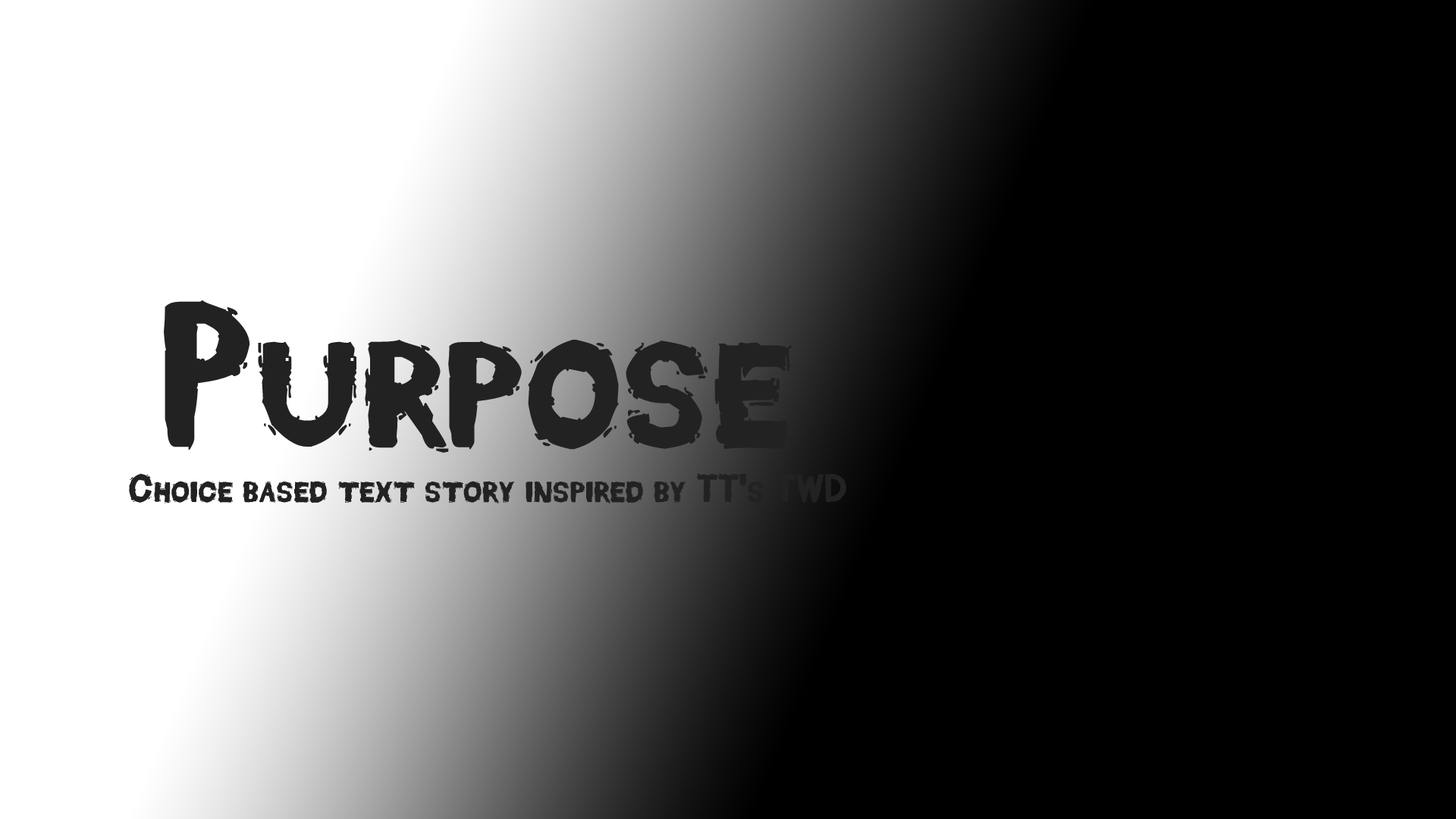
<style>
.page{position:relative;width:1456px;height:819px;background:#000000}
.page>*{position:absolute;margin:0}
.t1{font:208.4px "DeadFontWalking";color:#222222}
.t2{font:40.4px "DeadFontWalking";color:#222222}
</style>
<div class="page">
<p class="t1" style="left:163px;top:300px;width:629px;height:153px">Purpose</p>
<p class="t2" style="left:129px;top:473px;width:717px;height:31px">Choice based text story inspired by TT's TWD</p>
</div>
